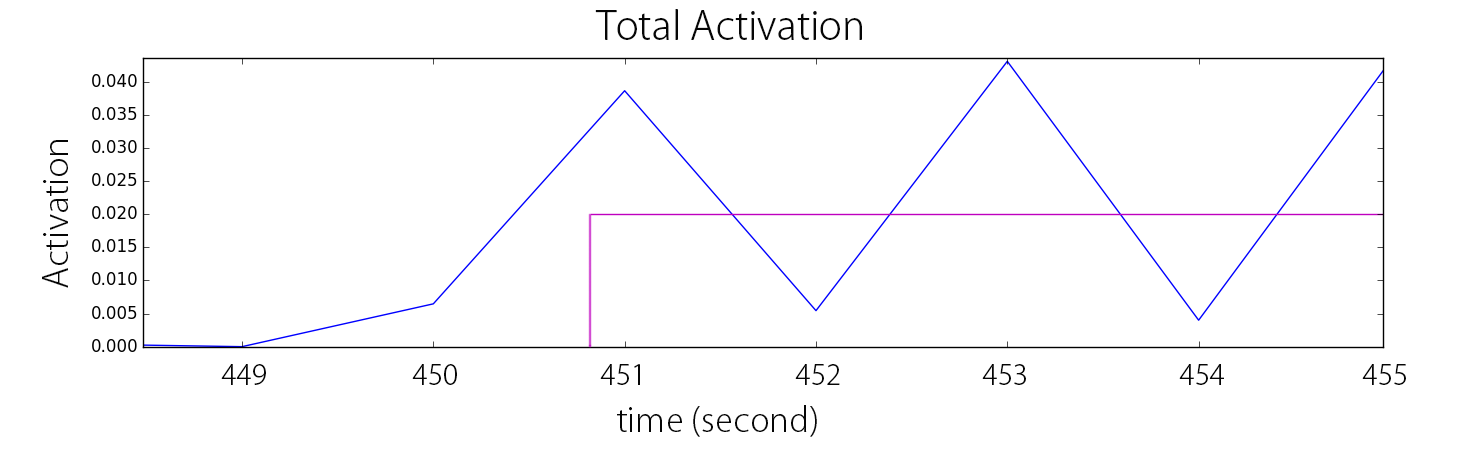
<style>
.page{position:relative;width:1457px;height:472px;background:#ffffff}
.page>*{position:absolute;margin:0}
.t1{font:38.9px "KozGoPro-Light";color:#060606}
.t2{font:33.3px "KozGoPro-Light";color:#060606}
.t3{font:27.8px "KozGoPro-Light";color:#060606}
</style>
<div class="page">
<p class="t1" style="left:595px;top:9px;width:267px;height:31px">Total Activation</p>
<p class="t2" style="left:42px;top:140px;width:26px;height:148px;rotate:-90deg">Activation</p>
<p class="t3" style="left:221px;top:364px;width:45px;height:21px">449</p>
<p class="t3" style="left:412px;top:364px;width:45px;height:21px">450</p>
<p class="t3" style="left:600px;top:364px;width:40px;height:21px">451</p>
<p class="t3" style="left:795px;top:364px;width:45px;height:21px">452</p>
<p class="t3" style="left:982px;top:364px;width:44px;height:21px">453</p>
<p class="t3" style="left:1179px;top:364px;width:45px;height:21px">454</p>
<p class="t3" style="left:1362px;top:364px;width:44px;height:21px">455</p>
<p class="t2" style="left:617px;top:405px;width:200px;height:32px">time (second)</p>
</div>
